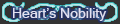
<style>
.page{position:relative;width:120px;height:24px;background:#333333}
.page>*{position:absolute;margin:0}
.t1{font:14px "MicrosoftSansSerif";color:#e0e0f0}
</style>
<div class="page">
<p class="t1" style="left:13px;top:8px;width:94px;height:13px">Heart’s Nobility</p>
</div>
